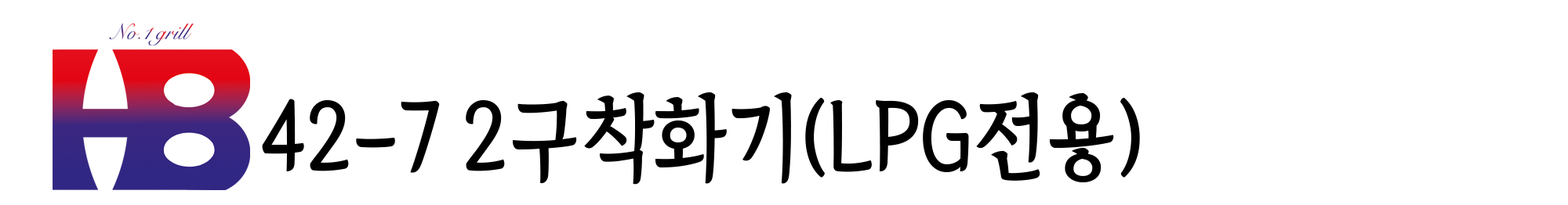
<style>
.page{position:relative;width:1568px;height:205px;background:#ffffff}
.page>*{position:absolute;margin:0}
.t1{font:93.7px "TheIndependenceHallofKorea-Regular";color:#000000;scale:0.89 1}
</style>
<div class="page">
<p class="t1" style="left:262px;top:93px;width:878px;height:92px">42-7 2구착화기(LPG전용)</p>
</div>
